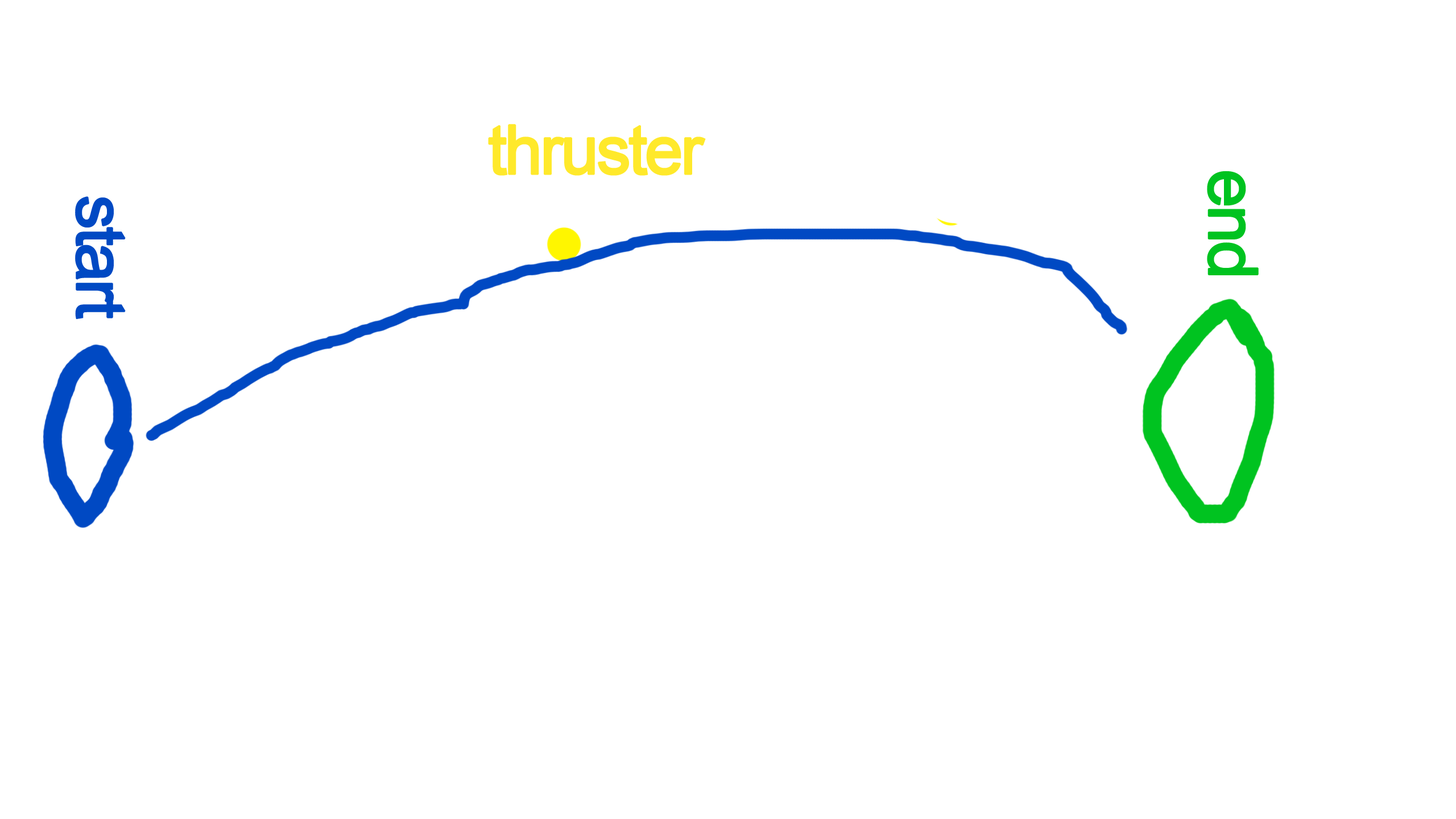
<style>
.page{position:relative;width:1456px;height:819px;background:#ffffff}
.page>*{position:absolute;margin:0}
.t1{font:68.2px "ArialMT";letter-spacing:-0.06em;color:#ffe92b;font-weight:bold}
.t2{font:68.2px "ArialMT";letter-spacing:-0.06em;color:#00c320;font-weight:bold}
.t3{font:68.2px "ArialMT";letter-spacing:-0.06em;color:#0049c3;font-weight:bold}
</style>
<div class="page">
<p class="t1" style="left:488px;top:124px;width:218px;height:52px">thruster</p>
<p class="t2" style="left:1207px;top:171px;width:52px;height:104px;rotate:90deg">end</p>
<p class="t3" style="left:75px;top:196px;width:51px;height:123px;rotate:90deg">start</p>
</div>
